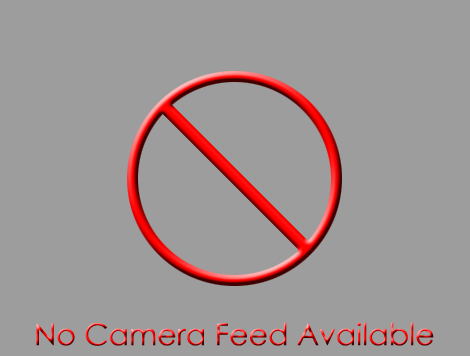
<style>
.page{position:relative;width:470px;height:356px;background:#9d9d9d}
.page>*{position:absolute;margin:0}
.t1{font:30px "CenturyGothic"}
</style>
<div class="page">
<p class="t1" style="left:36px;top:322px;width:398px;height:24px">No Camera Feed Available</p>
</div>
